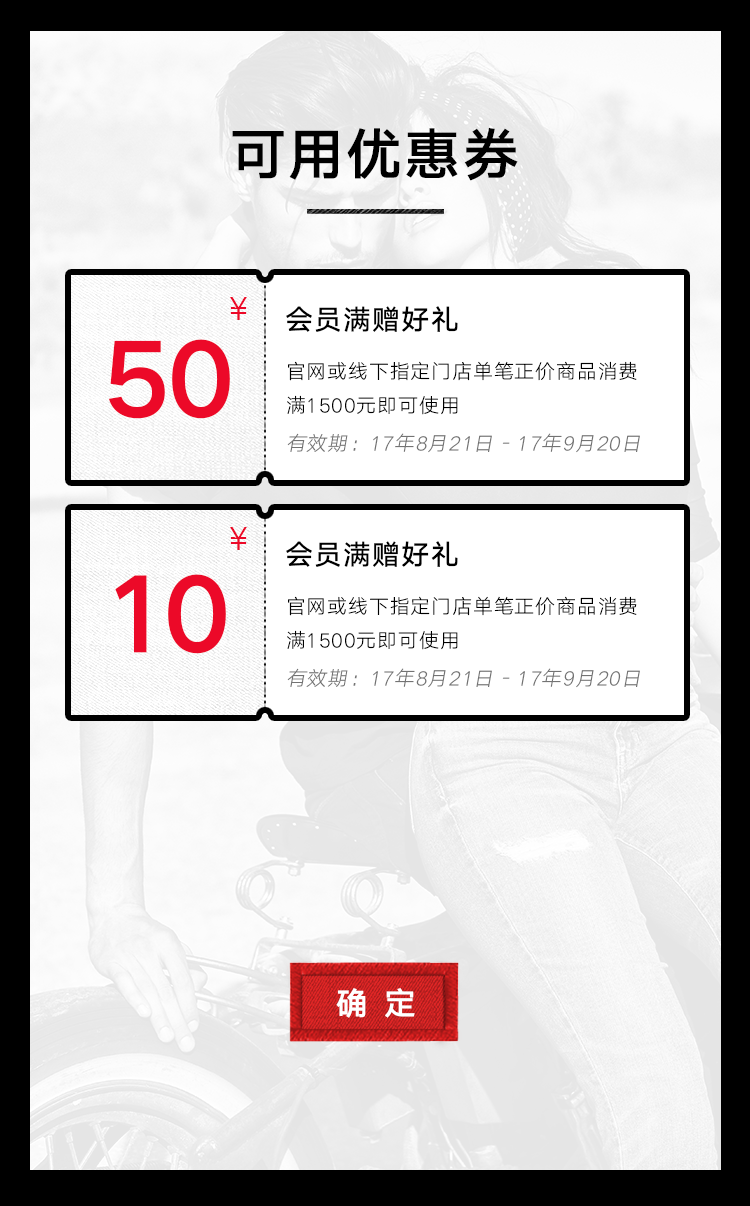
<style>
.page{position:relative;width:750px;height:1206px}
.page>*{position:absolute;margin:0}
.t1{font:56px "HYQiHei-GZS";letter-spacing:0.04em;color:#000000}
.t2{font:33.3px "STHeitiSC-Light";letter-spacing:-0.04em;color:#ec0928}
.t3{font:28px "HYQiHei-FZS";letter-spacing:0.04em;color:#000000}
.t4{font:102.8px "HYQiHei-GZS";letter-spacing:-0.04em;color:#ec0928}
.t5{font:20px/34px "HYQiHei-DZS";letter-spacing:0.04em;color:#000000}
.t6{font:20px "HYQiHei-DZS";letter-spacing:0.04em;color:#737373;font-style:italic}
.t7{font:102.8px "HYQiHei-GZS";letter-spacing:-0.1em;color:#ec0928}
</style>
<div class="page">
<p class="t1" style="left:232px;top:128px;width:286px;height:53px">可用优惠券</p>
<p class="t2" style="left:230px;top:297px;width:17px;height:23px">￥</p>
<p class="t3" style="left:286px;top:306px;width:172px;height:26px">会员满赠好礼</p>
<p class="t4" style="left:108px;top:339px;width:122px;height:80px">50</p>
<p class="t5" style="left:287px;top:361px;width:350px;height:54px">官网或线下指定门店单笔正价商品消费满1500元即可使用</p>
<p class="t6" style="left:287px;top:433px;width:353px;height:20px">有效期：17年8月21日 - 17年9月20日</p>
<p class="t2" style="left:230px;top:527px;width:17px;height:23px">￥</p>
<p class="t3" style="left:286px;top:541px;width:172px;height:26px">会员满赠好礼</p>
<p class="t7" style="left:115px;top:574px;width:111px;height:80px">10</p>
<p class="t5" style="left:287px;top:596px;width:350px;height:54px">官网或线下指定门店单笔正价商品消费满1500元即可使用</p>
<p class="t6" style="left:287px;top:668px;width:353px;height:20px">有效期：17年8月21日 - 17年9月20日</p>
</div>
